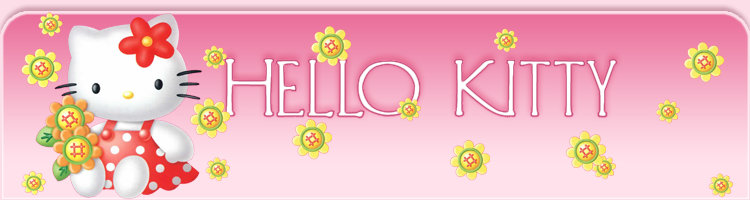
<style>
.page{position:relative;width:750px;height:200px}
.page>*{position:absolute;margin:0}
.t1{font:60px "DiehlDeco";font-weight:bold;scale:1.1 1}
</style>
<div class="page">
<p class="t1" style="left:224px;top:58px;width:393px;height:60px">Hello Kitty</p>
</div>
